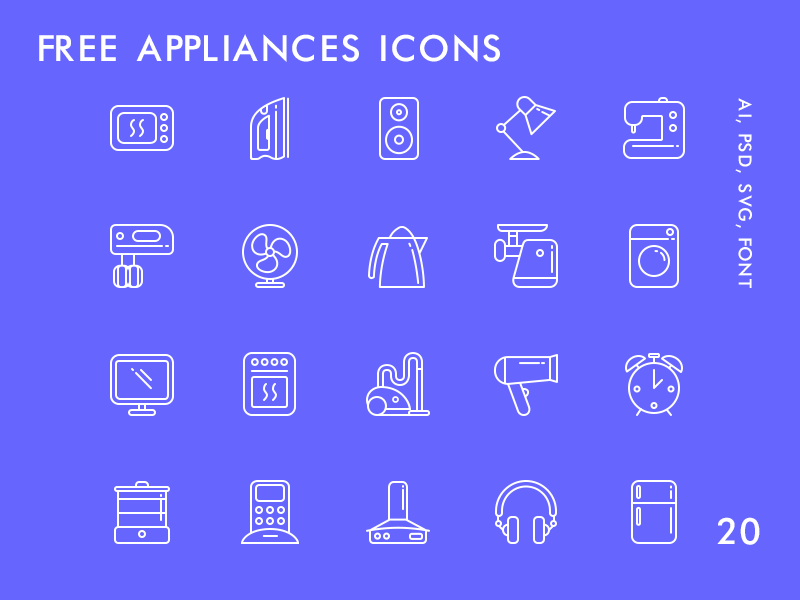
<style>
.page{position:relative;width:800px;height:600px;background:#6666ff}
.page>*{position:absolute;margin:0}
.t1{font:41.7px "Futura-Normal";letter-spacing:0.04em;color:#ffffff;text-transform:uppercase}
.t2{font:20.8px "Futura-Normal";letter-spacing:0.04em;color:#ffffff;text-transform:uppercase}
</style>
<div class="page">
<p class="t1" style="left:39px;top:34px;width:461px;height:28px">free APPLIANCES icons</p>
<p class="t2" style="left:735px;top:98px;width:17px;height:190px;rotate:90deg">ai, psd, svg, font</p>
<p class="t1" style="left:717px;top:517px;width:43px;height:28px">20</p>
</div>
